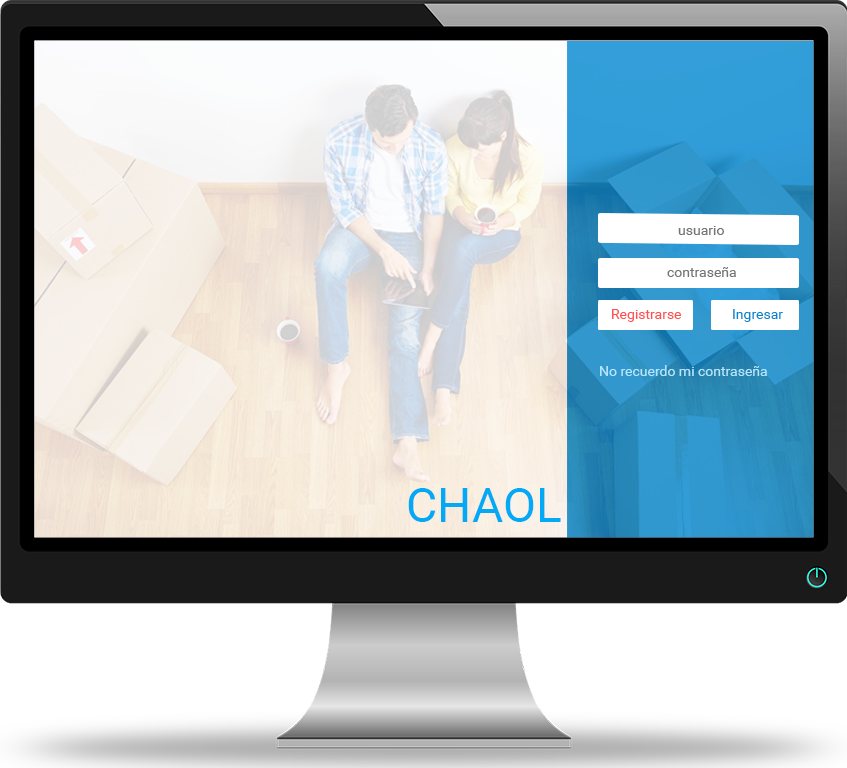
<style>
.page{position:relative;width:847px;height:768px}
.page>*{position:absolute;margin:0}
.t1{font:14px "Roboto-Regular";color:#757575}
.t2{font:14px "Roboto-Regular";color:#ff5252}
.t3{font:14px "Roboto-Regular";color:#0288d1}
.t4{font:14px "Roboto-Regular";color:#b3e5fc}
.t5{font:48px "Roboto-Regular";color:#03a9f4}
</style>
<div class="page">
<p class="t1" style="left:678px;top:226px;width:46px;height:9px">usuario</p>
<p class="t1" style="left:667px;top:267px;width:69px;height:10px">contraseña</p>
<p class="t2" style="left:612px;top:309px;width:69px;height:13px">Registrarse</p>
<p class="t3" style="left:733px;top:309px;width:50px;height:13px">Ingresar</p>
<p class="t4" style="left:600px;top:365px;width:167px;height:11px">No recuerdo mi contraseña</p>
<p class="t5" style="left:408px;top:488px;width:153px;height:34px">CHAOL</p>
</div>
